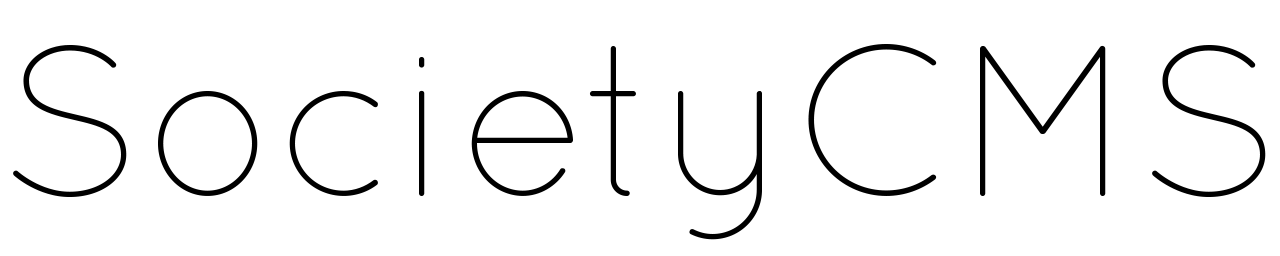
<style>
.page{position:relative;width:1280px;height:256px;background:#ffffff}
.page>*{position:absolute;margin:0}
.t1{font:214.3px "Quicksand-Light";color:#000000}
</style>
<div class="page">
<p class="t1" style="left:13px;top:44px;width:1253px;height:196px">SocietyCMS</p>
</div>
